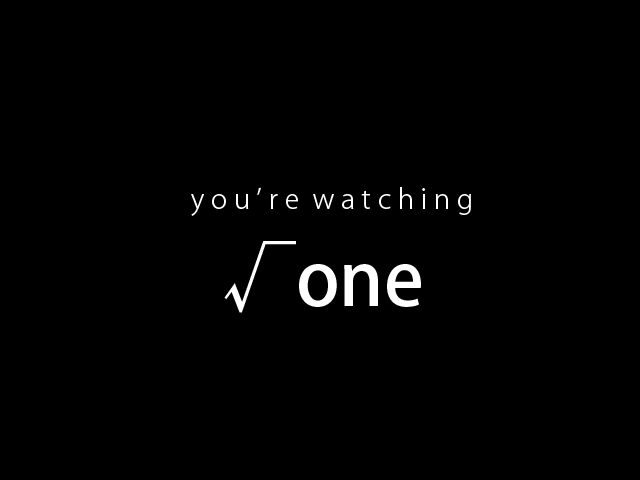
<style>
.page{position:relative;width:640px;height:480px;background:#000000}
.page>*{position:absolute;margin:0}
.t1{font:27.4px "KozGoPr6N-Light";color:#ffffff}
.t2{font:73.9px "KozGoPr6N-Medium";color:#ffffff}
</style>
<div class="page">
<p class="t1" style="left:191px;top:187px;width:280px;height:29px">y o u ’ r e  w a t c h i n g</p>
<p class="t2" style="left:224px;top:241px;width:197px;height:72px">√one</p>
</div>
